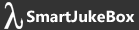
<style>
.page{position:relative;width:139px;height:30px;background:#333333}
.page>*{position:absolute;margin:0}
.t1{font:16px "SegoeWP-Bold";color:#ffffff}
</style>
<div class="page">
<p class="t1" style="left:27px;top:10px;width:108px;height:13px">SmartJukeBox</p>
</div>
